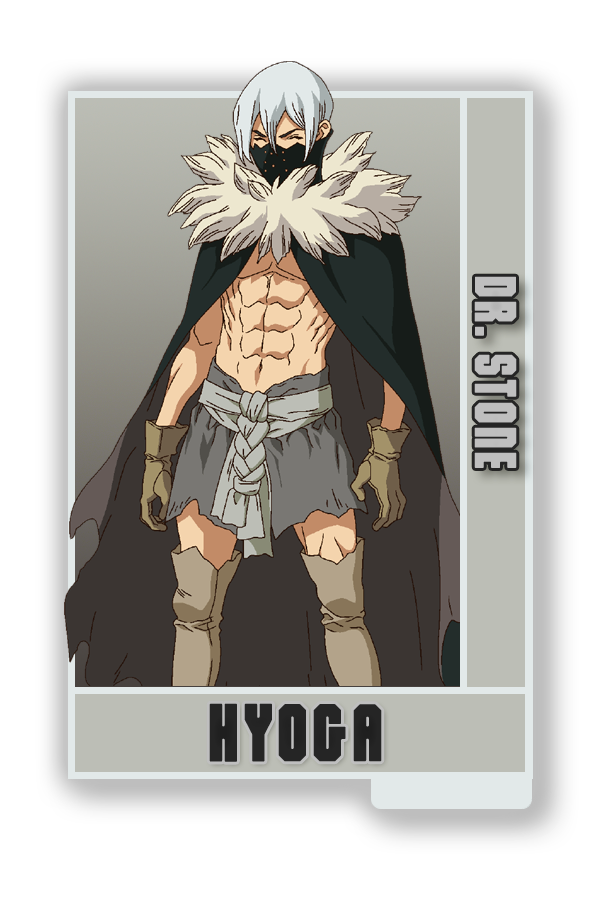
<style>
.page{position:relative;width:600px;height:900px;background:#ffffff}
.page>*{position:absolute;margin:0}
.t1{font:54.3px "DalmationDemo";color:#bfbfbf}
.t2{font:75px "DalmationDemo";color:#252525}
</style>
<div class="page">
<p class="t1" style="left:474px;top:276px;width:43px;height:192px;rotate:90deg">Dr. Stone</p>
<p class="t2" style="left:209px;top:703px;width:173px;height:59px">Hyoga</p>
</div>
